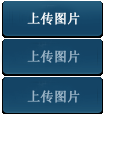
<style>
.page{position:relative;width:120px;height:152px;background:#ffffff}
.page>*{position:absolute;margin:0}
.t1{font:13px "SimSun";color:#ffffff;font-weight:bold}
.t2{font:13px "SimSun";color:#9db6c8;font-weight:bold}
</style>
<div class="page">
<p class="t1" style="left:27px;top:12px;width:53px;height:13px">上传图片</p>
<p class="t2" style="left:27px;top:50px;width:53px;height:13px">上传图片</p>
<p class="t2" style="left:27px;top:90px;width:53px;height:13px">上传图片</p>
</div>
